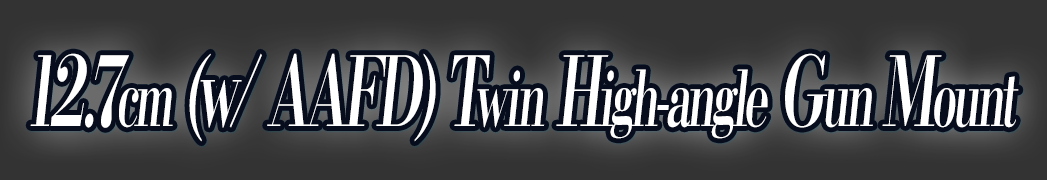
<style>
.page{position:relative;width:1047px;height:180px;background:#333333}
.page>*{position:absolute;margin:0}
.t1{font:96px "KochoStd-Heavy";letter-spacing:-0.08em;color:#ffffff;font-style:italic;scale:0.59 1}
.t2{font:76.8px "KochoStd-Heavy";letter-spacing:-0.08em;color:#ffffff;font-style:italic;scale:0.59 1}
</style>
<div class="page">
<p class="t1" style="left:30px;top:53px;width:989px;height:89px">12.7<span class="t2">cm</span> (w/ AAFD) T<span class="t2">win</span> H<span class="t2">igh-angle</span> G<span class="t2">un </span>M<span class="t2">ount</span></p>
</div>
